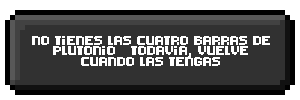
<style>
.page{position:relative;width:300px;height:100px;background:#313131}
.page>*{position:absolute;margin:0}
.t1{font:9px "8-bit-pusab";color:#ffffff}
</style>
<div class="page">
<p class="t1" style="left:32px;top:36px;width:238px;height:30px;text-align:center">no tienes las cuatro barras de plutonio   todavia, vuelve cuando las tengas</p>
</div>
